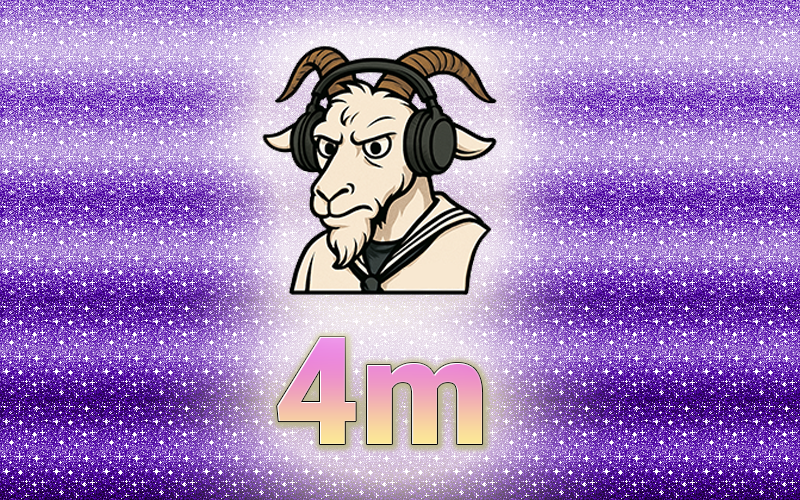
<style>
.page{position:relative;width:800px;height:500px}
.page>*{position:absolute;margin:0}
.t1{font:150px "Roboto-Black"}
</style>
<div class="page">
<p class="t1" style="left:277px;top:337px;width:206px;height:107px">4m</p>
</div>
